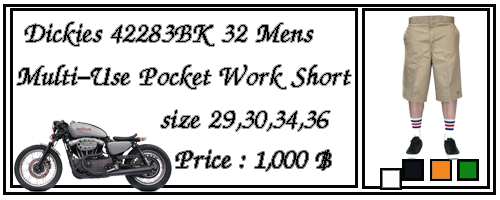
<style>
.page{position:relative;width:500px;height:200px;background:#ffffff}
.page>*{position:absolute;margin:0}
.t1{font:36px "DSUMonTaNa";color:#050505}
</style>
<div class="page">
<p class="t1" style="left:17px;top:22px;width:334px;height:109px">Dickies 42283BK 32 Mens <br>Multi-Use Pocket Work Short<br>     size 29,30,34,36</p>
<p class="t1" style="left:176px;top:150px;width:155px;height:21px">Price : 1,000 ฿</p>
</div>
